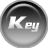
<style>
.page{position:relative;width:48px;height:48px}
.page>*{position:absolute;margin:0}
.t1{font:18px "AirMillhouseItalic";color:#ffffff}
</style>
<div class="page">
<p class="t1" style="left:8px;top:16px;width:32px;height:16px">Key</p>
</div>
